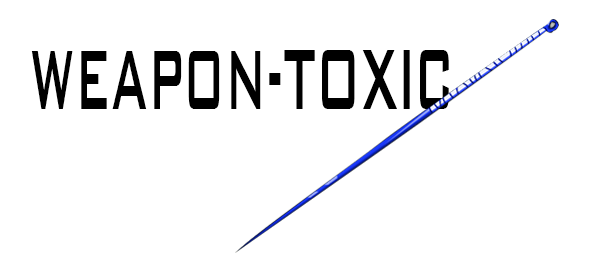
<style>
.page{position:relative;width:600px;height:266px;background:#ffffff}
.page>*{position:absolute;margin:0}
.t1{font:112.6px "BankGothicBT-Medium";color:#000000;scale:0.42 1}
.t2{font:140px "BankGothicBT-Medium";color:#000000;scale:0.42 1}
</style>
<div class="page">
<p class="t1" style="left:31px;top:50px;width:418px;height:59px">WEAPON-<span class="t2">toxic</span></p>
</div>
